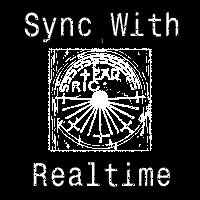
<style>
.page{position:relative;width:200px;height:200px;background:#000000}
.page>*{position:absolute;margin:0}
.t1{font:30px "MonospaceTypewriter";color:#ffffff}
.t2{font:5px "MonospaceTypewriter";color:#ffffff}
</style>
<div class="page">
<p class="t1" style="left:24px;top:12px;width:155px;height:175px;text-align:center">Sync With<br><span class="t2">j<br><br><br><br><br><br><br><br><br><br><br><br><br><br><br><br><br><br><br></span>Realtime</p>
</div>
